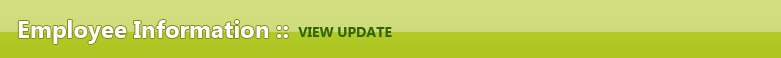
<style>
.page{position:relative;width:781px;height:58px}
.page>*{position:absolute;margin:0}
.t1{font:24px "SegoeUI-Bold";color:#fefefe}
.t2{font:14px "SegoeUI-Bold";color:#336600}
</style>
<div class="page">
<p class="t1" style="left:18px;top:20px;width:270px;height:24px">Employee Information ::</p>
<p class="t2" style="left:298px;top:27px;width:94px;height:10px">VIEW UPDATE</p>
</div>
